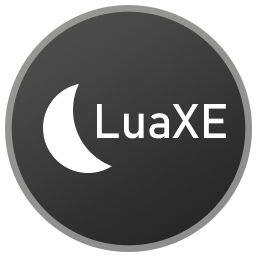
<style>
.page{position:relative;width:256px;height:256px;background:#ffffff}
.page>*{position:absolute;margin:0}
.t1{font:48px "Bahnschrift";color:#ffffff}
</style>
<div class="page">
<p class="t1" style="left:97px;top:104px;width:129px;height:35px">LuaXE</p>
</div>
